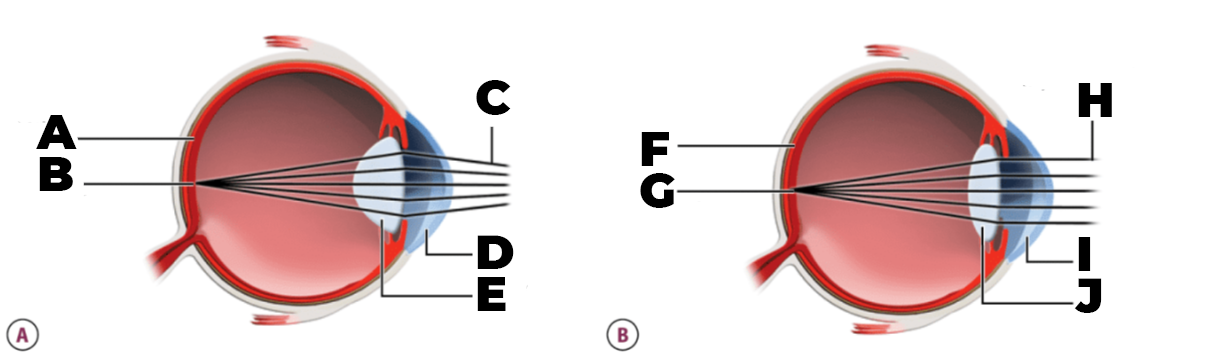
<style>
.page{position:relative;width:1220px;height:358px;background:#ffffff}
.page>*{position:absolute;margin:0}
.t1{font:48px/14px "Montserrat-Black";color:#000000}
</style>
<div class="page">
<p class="t1" style="left:476px;top:80px;width:38px;height:231px">C<br><br><br><br><br><br><br><br><br><br><br>D<br><br><br>E</p>
<p class="t1" style="left:1074px;top:83px;width:38px;height:230px">H<br><br><br><br><br><br><br><br><br><br><br>I<br><br><br>J</p>
<p class="t1" style="left:36px;top:115px;width:41px;height:76px">A<br><br><br>B</p>
<p class="t1" style="left:640px;top:132px;width:35px;height:76px">F<br><br><br>G</p>
</div>
